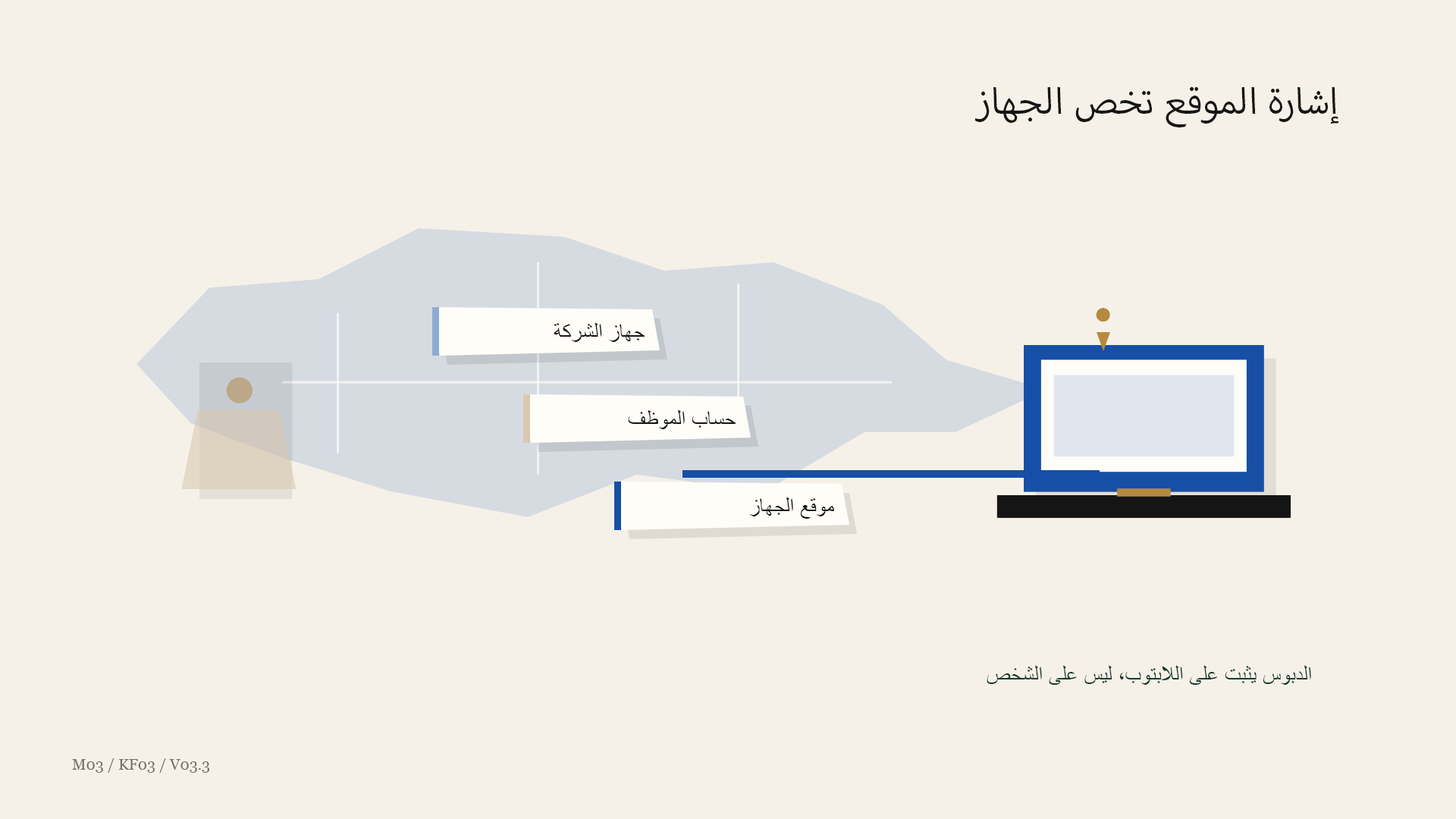
<style>
.page{position:relative;width:1456px;height:819px;background:#f6f1e8}
.page>*{position:absolute;margin:0}
.t1{font:51.6px "MyriadArabic-Regular";color:#151515}
.t2{font:31.8px "ArialMT";color:#b58a3e}
.t3{font:22px "ArialMT";color:#151515}
.t4{font:60.1px "ArialMT";color:#bca788}
.t5{font:22px "ArialMT";color:#173c32}
.t6{font:15.2px "Georgia";color:#716f6b}
</style>
<div class="page">
<p class="t1" style="left:974px;top:86px;width:365px;height:41px">إشارة الموقع تخص الجهاز</p>
<p class="t2" style="left:1096px;top:308px;width:14px;height:14px">●</p>
<p class="t3" style="left:554px;top:322px;width:91px;height:20px">جهاز الشركة</p>
<p class="t4" style="left:226px;top:377px;width:27px;height:26px">●</p>
<p class="t3" style="left:628px;top:409px;width:108px;height:20px">حساب الموظف</p>
<p class="t3" style="left:749px;top:497px;width:85px;height:22px">موقع الجهاز</p>
<p class="t5" style="left:987px;top:665px;width:324px;height:20px">الدبوس يثبت على اللابتوب، ليس على الشخص</p>
<p class="t6" style="left:72px;top:758px;width:137px;height:15px">M03 / KF03 / V03.3</p>
</div>
